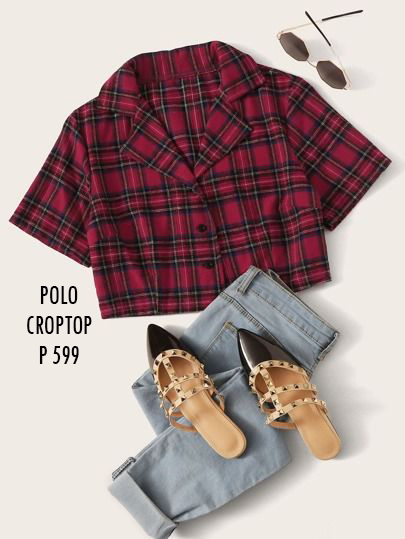
<style>
.page{position:relative;width:405px;height:539px;background:#f0ebe5}
.page>*{position:absolute;margin:0}
.t1{font:28.7px "TwCenMT-Condensed";color:#040003;scale:0.87 1}
</style>
<div class="page">
<p class="t1" style="left:27px;top:286px;width:65px;height:78px;text-align:center">POLO<br>CROPTOP<br>P 599</p>
</div>
